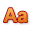
<style>
.page{position:relative;width:32px;height:32px;background:#ffffff}
.page>*{position:absolute;margin:0}
.t1{font:19px "Arial-BoldMT";color:#e68c39}
</style>
<div class="page">
<p class="t1" style="left:3px;top:8px;width:25px;height:15px">Aa</p>
</div>
